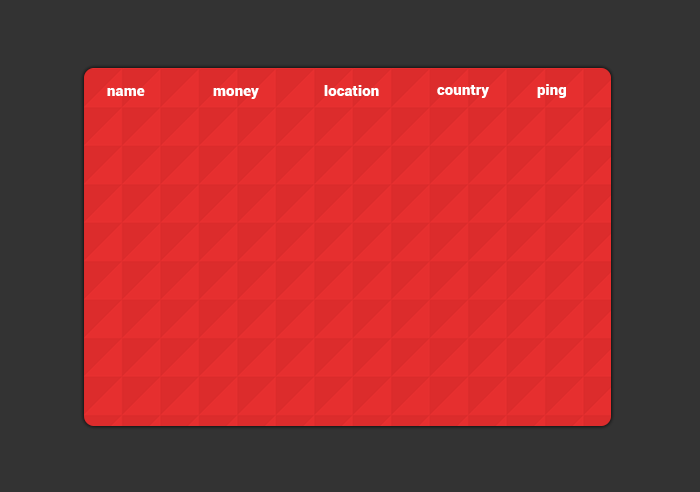
<style>
.page{position:relative;width:700px;height:492px;background:#333333}
.page>*{position:absolute;margin:0}
.t1{font:15.1px "Roboto-Black";color:#ffffff}
</style>
<div class="page">
<p class="t1" style="left:107px;top:88px;width:38px;height:8px">name</p>
<p class="t1" style="left:213px;top:88px;width:46px;height:11px">money</p>
<p class="t1" style="left:324px;top:85px;width:55px;height:11px">location</p>
<p class="t1" style="left:437px;top:85px;width:52px;height:13px">country</p>
<p class="t1" style="left:537px;top:84px;width:29px;height:14px">ping</p>
</div>
